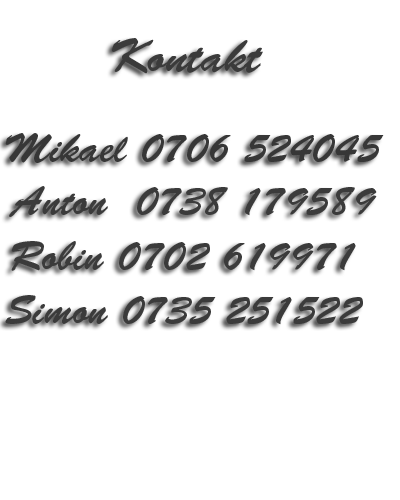
<style>
.page{position:relative;width:400px;height:500px;background:#ffffff}
.page>*{position:absolute;margin:0}
.t1{font:46.7px "BrushScriptStd";color:#3b3b3b}
.t2{font:40px "BrushScriptStd";color:#373737}
.t3{font:40px "BrushScriptStd";color:#3b3b3b}
</style>
<div class="page">
<p class="t1" style="left:112px;top:38px;width:151px;height:36px">Kontakt</p>
<p class="t2" style="left:5px;top:133px;width:379px;height:30px">Mikael 0706 524045</p>
<p class="t3" style="left:9px;top:186px;width:368px;height:31px">Anton  0738 179589</p>
<p class="t3" style="left:11px;top:241px;width:345px;height:30px">Robin 0702 619971</p>
<p class="t3" style="left:5px;top:295px;width:358px;height:30px">Simon 0735 251522</p>
</div>
